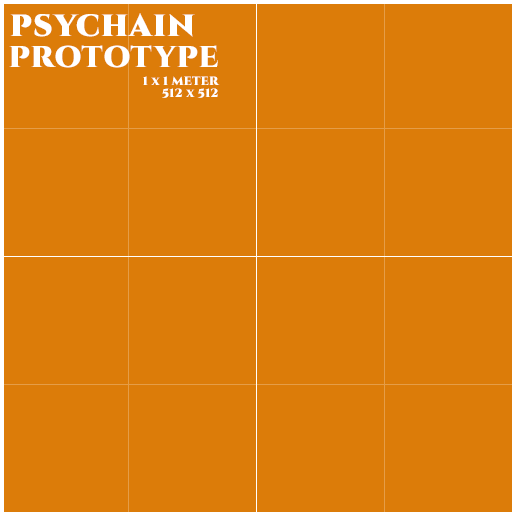
<style>
.page{position:relative;width:512px;height:512px;background:#dc7c09}
.page>*{position:absolute;margin:0}
.t1{font:36px "Cinzel-Black";letter-spacing:0.025em;color:#ffffff}
.t2{font:12px/18px "Cinzel-Black";letter-spacing:0.025em;color:#ffffff}
.t3{font:30px/18px "Cinzel-Black";letter-spacing:0.025em;color:#ffffff}
.t4{font:12px/12px "Cinzel-Black";letter-spacing:0.025em;color:#ffffff}
</style>
<div class="page">
<p class="t1" style="left:10px;top:13px;width:185px;height:24px">psychain</p>
<p class="t2" style="left:9px;top:45px;width:211px;height:53px;text-align:right"><span class="t3">PROTOTYPE<br></span>1 x 1 METER<br><span class="t4">512 x 512</span></p>
</div>
